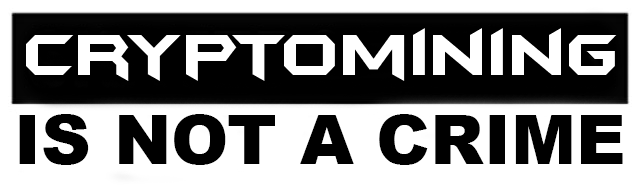
<style>
.page{position:relative;width:640px;height:192px;background:#ffffff}
.page>*{position:absolute;margin:0}
.t1{font:69px "Arial-Black";color:#000000}
</style>
<div class="page">
<p class="t1" style="left:19px;top:114px;width:604px;height:51px">IS NOT A CRIME</p>
</div>
